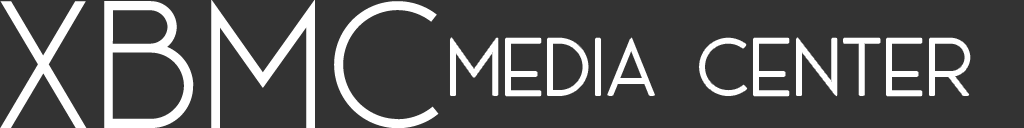
<style>
.page{position:relative;width:1024px;height:128px;background:#333333}
.page>*{position:absolute;margin:0}
.t1{font:186.2px "AceSansDemo";color:#ffffff}
.t2{font:82.6px "AceSansDemo";color:#ffffff}
</style>
<div class="page">
<p class="t1" style="left:0px;top:0px;width:439px;height:129px">XBMC</p>
<p class="t2" style="left:451px;top:38px;width:519px;height:58px">MEDIA CENTER</p>
</div>
